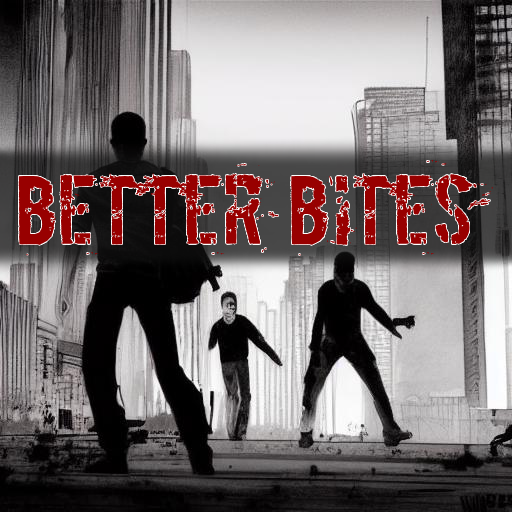
<style>
.page{position:relative;width:512px;height:512px}
.page>*{position:absolute;margin:0}
.t1{font:82px "Boycott";color:#980000}
</style>
<div class="page">
<p class="t1" style="left:18px;top:160px;width:475px;height:96px">Better bites</p>
</div>
